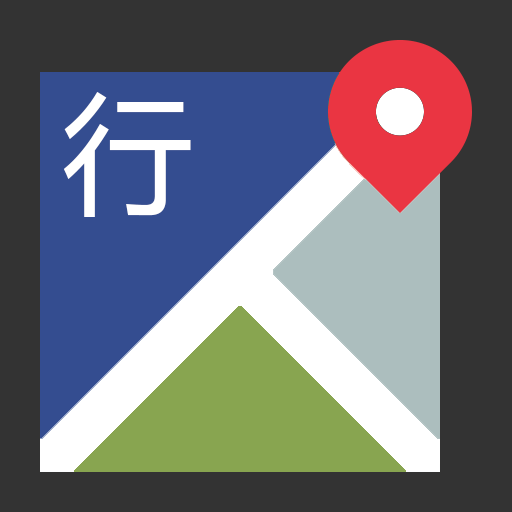
<style>
.page{position:relative;width:512px;height:512px;background:#333333}
.page>*{position:absolute;margin:0}
.t1{font:130px "MicrosoftYaHei";color:#ffffff}
</style>
<div class="page">
<p class="t1" style="left:63px;top:92px;width:128px;height:125px">行</p>
</div>
